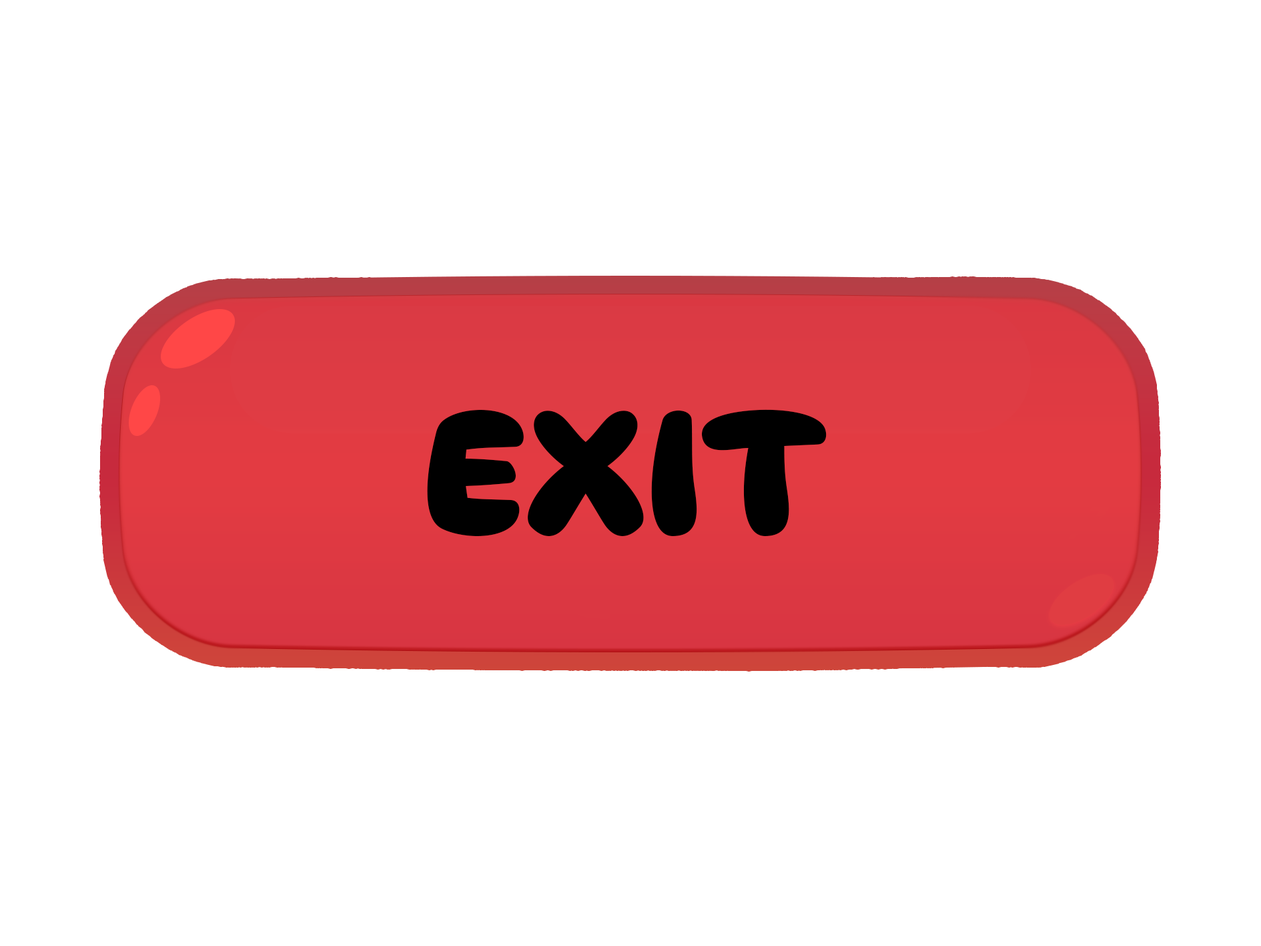
<style>
.page{position:relative;width:1261px;height:946px;background:#ffffff}
.page>*{position:absolute;margin:0}
.t1{font:166.8px "THEREN-Regular";color:#000000}
</style>
<div class="page">
<p class="t1" style="left:427px;top:409px;width:400px;height:127px">EXIT</p>
</div>
